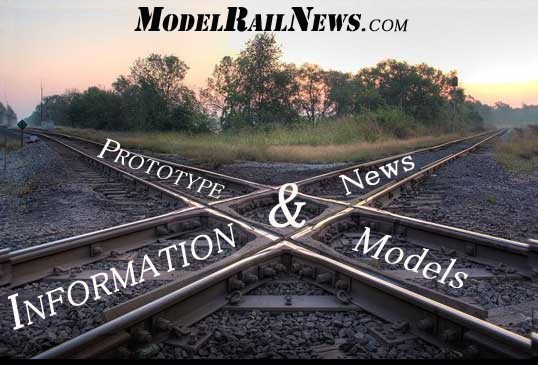
<style>
.page{position:relative;width:538px;height:365px}
.page>*{position:absolute;margin:0}
.t1{font:36px "Stencil";color:#060606;font-variant:small-caps;font-style:italic}
.t2{font:24px "MS-PMincho";color:#060606;font-variant:small-caps;font-weight:bold;font-style:italic}
.t3{font:30px "MS-PMincho";color:#fbf6f6;font-variant:small-caps;font-weight:bold;font-style:italic}
.t4{font:51.1px "MS-PMincho";color:#fbf6f6;font-weight:bold;font-style:italic;scale:1.15 1}
.t5{font:109.4px "MS-PMincho";color:#fbf6f6;font-weight:bold;font-style:italic;scale:0.96 1}
.t6{font:48px "MS-PMincho";color:#fcf8f7;font-variant:small-caps;font-weight:bold;font-style:italic}
.t7{font:66px "MS-PMincho";color:#fbf6f6;font-weight:bold;font-style:italic}
.t8{font:42.3px "MS-PMincho";color:#fbf6f6;font-weight:bold;font-style:italic}
</style>
<div class="page">
<p class="t1" style="left:134px;top:7px;width:275px;height:25px">ModelRailNews<span class="t2">.com</span></p>
<p class="t3" style="left:97px;top:138px;width:128px;height:61px;rotate:19deg">Prototype</p>
<p class="t4" style="left:339px;top:155px;width:76px;height:40px;rotate:-22deg">News</p>
<p class="t5" style="left:269px;top:183px;width:37px;height:45px">&amp;</p>
<p class="t6" style="left:8px;top:223px;width:227px;height:107px;rotate:-21deg">Information</p>
<p class="t7" style="left:351px;top:226px;width:117px;height:62px;text-align:center;rotate:21deg">Models<br><span class="t8">lls</span></p>
</div>
